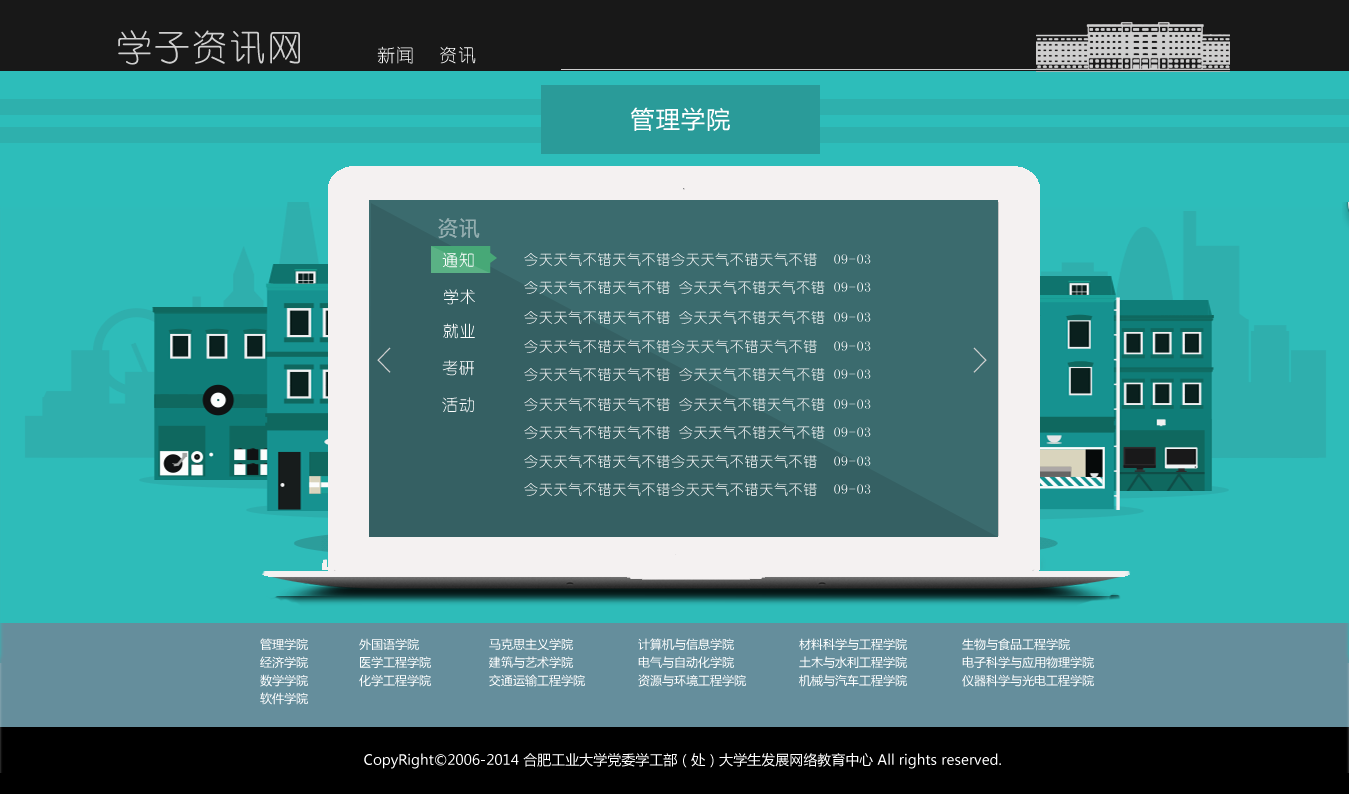
<style>
.page{position:relative;width:1349px;height:794px}
.page>*{position:absolute;margin:0}
.t1{font:36px "YouYuan";letter-spacing:0.05em;color:#cfcfcf}
.t2{font:18px "YouYuan";letter-spacing:0.05em;color:#ffffff}
.t3{font:24px "MicrosoftYaHei";letter-spacing:0.05em;color:#ffffff}
.t4{font:22px "SimHei";color:#93aeaf}
.t5{font:16px "YouYuan";letter-spacing:0.05em;color:#ffffff}
.t6{font:14px "YouYuan";letter-spacing:0.05em;color:#fcfbfb}
.t7{font:14px "YouYuan";letter-spacing:0.05em;color:#fffefe}
.t8{font:14px "YouYuan";letter-spacing:0.05em;color:#fefbfb}
.t9{font:14px "YouYuan";letter-spacing:0.05em;color:#fbf9f9}
.t10{font:14px "YouYuan";letter-spacing:0.05em;color:#fcf9f9}
.t11{font:14px "YouYuan";letter-spacing:0.05em;color:#fefcfc}
.t12{font:14px "YouYuan";letter-spacing:0.05em;color:#fbfafa}
.t13{font:12px/18px "MicrosoftYaHei";color:#ffffff}
.t14{font:14px "MicrosoftYaHei";color:#ffffff}
</style>
<div class="page">
<p class="t1" style="left:118px;top:30px;width:182px;height:35px">学子资讯网</p>
<p class="t2" style="left:377px;top:46px;width:36px;height:18px">新闻</p>
<p class="t2" style="left:440px;top:46px;width:36px;height:18px">资讯</p>
<p class="t3" style="left:630px;top:107px;width:100px;height:24px">管理学院</p>
<p class="t4" style="left:438px;top:218px;width:42px;height:21px">资讯</p>
<p class="t5" style="left:442px;top:252px;width:32px;height:16px">通知</p>
<p class="t6" style="left:524px;top:252px;width:347px;height:14px">今天天气不错天气不错今天天气不错天气不错  09-03</p>
<p class="t7" style="left:524px;top:280px;width:347px;height:14px">今天天气不错天气不错 今天天气不错天气不错 09-03</p>
<p class="t5" style="left:444px;top:289px;width:31px;height:16px">学术</p>
<p class="t7" style="left:524px;top:310px;width:347px;height:14px">今天天气不错天气不错 今天天气不错天气不错 09-03</p>
<p class="t5" style="left:443px;top:323px;width:32px;height:16px">就业</p>
<p class="t8" style="left:524px;top:339px;width:347px;height:14px">今天天气不错天气不错今天天气不错天气不错  09-03</p>
<p class="t1" style="left:377px;top:347px;width:14px;height:26px">&lt;</p>
<p class="t1" style="left:973px;top:347px;width:14px;height:26px">&gt;</p>
<p class="t5" style="left:442px;top:360px;width:32px;height:16px">考研</p>
<p class="t9" style="left:524px;top:367px;width:347px;height:14px">今天天气不错天气不错 今天天气不错天气不错 09-03</p>
<p class="t5" style="left:442px;top:397px;width:32px;height:16px">活动</p>
<p class="t10" style="left:524px;top:397px;width:347px;height:14px">今天天气不错天气不错 今天天气不错天气不错 09-03</p>
<p class="t11" style="left:524px;top:425px;width:347px;height:14px">今天天气不错天气不错 今天天气不错天气不错 09-03</p>
<p class="t7" style="left:524px;top:454px;width:347px;height:14px">今天天气不错天气不错今天天气不错天气不错  09-03</p>
<p class="t12" style="left:524px;top:482px;width:347px;height:14px">今天天气不错天气不错今天天气不错天气不错  09-03</p>
<p class="t13" style="left:260px;top:638px;width:48px;height:67px">管理学院<br>经济学院<br>数学学院<br>软件学院</p>
<p class="t13" style="left:359px;top:638px;width:72px;height:49px">外国语学院<br>医学工程学院<br>化学工程学院</p>
<p class="t13" style="left:489px;top:638px;width:96px;height:49px">马克思主义学院<br>建筑与艺术学院<br>交通运输工程学院</p>
<p class="t13" style="left:638px;top:638px;width:108px;height:49px">计算机与信息学院<br>电气与自动化学院<br>资源与环境工程学院</p>
<p class="t13" style="left:799px;top:638px;width:108px;height:49px">材料科学与工程学院<br>土木与水利工程学院<br>机械与汽车工程学院</p>
<p class="t13" style="left:962px;top:638px;width:132px;height:49px">生物与食品工程学院<br>电子科学与应用物理学院<br>仪器科学与光电工程学院</p>
<p class="t14" style="left:364px;top:753px;width:637px;height:16px">CopyRight©2006-2014 合肥工业大学党委学工部（处）大学生发展网络教育中心 All rights reserved.</p>
</div>
